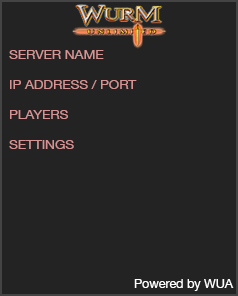
<style>
.page{position:relative;width:238px;height:296px;background:#232323}
.page>*{position:absolute;margin:0}
.t1{font:12.5px "HelveticaNeue";letter-spacing:-0.008em;color:#d69494;scale:1.1 1}
.t2{font:12.5px "HelveticaNeue";letter-spacing:-0.008em;color:#d79393;scale:1.1 1}
.t3{font:12.7px "HelveticaNeue";letter-spacing:-0.008em;color:#ffffff}
</style>
<div class="page">
<p class="t1" style="left:9px;top:50px;width:95px;height:9px">SERVER NAME</p>
<p class="t2" style="left:10px;top:80px;width:127px;height:9px">IP ADDRESS / PORT</p>
<p class="t2" style="left:10px;top:110px;width:58px;height:9px">PLAYERS</p>
<p class="t2" style="left:9px;top:140px;width:65px;height:9px">SETTINGS</p>
<p class="t3" style="left:134px;top:279px;width:100px;height:12px">Powered by WUA</p>
</div>
